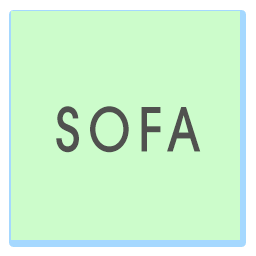
<style>
.page{position:relative;width:256px;height:256px;background:#ccfccb}
.page>*{position:absolute;margin:0}
.t1{font:60px "AvantGarde-Medium";letter-spacing:0.15em;color:#50514f;text-transform:uppercase;scale:0.84 1}
</style>
<div class="page">
<p class="t1" style="left:56px;top:106px;width:145px;height:47px">SOFA</p>
</div>
